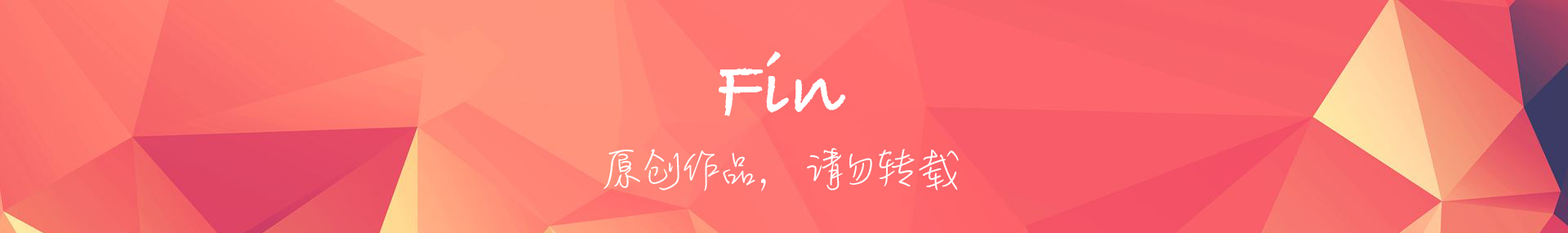
<style>
.page{position:relative;width:1568px;height:233px}
.page>*{position:absolute;margin:0}
.t1{font:81.7px "BradleyHandITCTT-Bold";color:#ffffff}
.t2{font:49px "MLingWaiMedium-SC";color:#ffffff}
</style>
<div class="page">
<p class="t1" style="left:719px;top:51px;width:127px;height:65px">Fin</p>
<p class="t2" style="left:604px;top:148px;width:355px;height:43px">原创作品，请勿转载</p>
</div>
